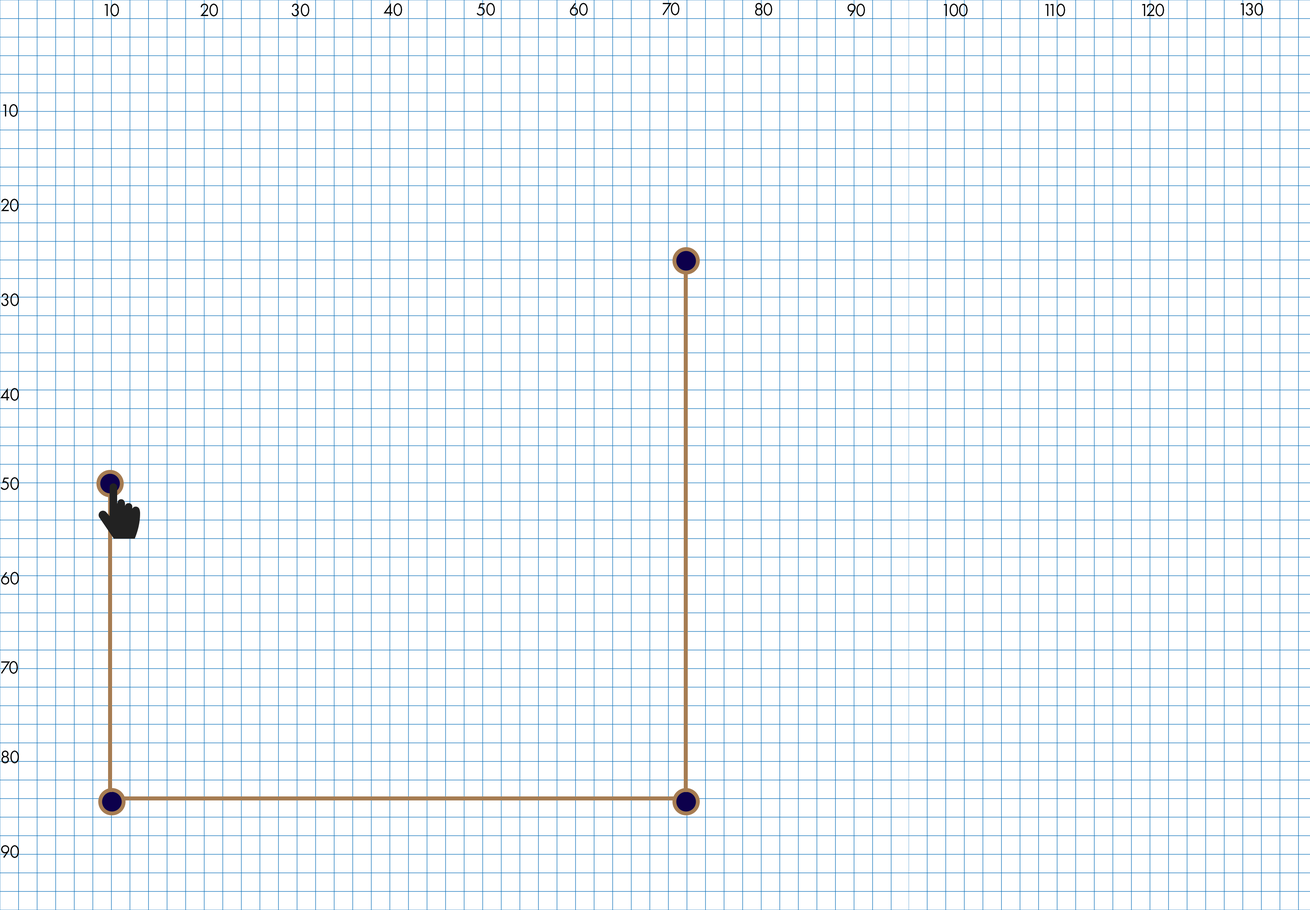
<style>
.page{position:relative;width:1310px;height:910px;background:#ffffff}
.page>*{position:absolute;margin:0}
.t1{font:18.2px "FuturaPT-Book";letter-spacing:-0.05em;color:#030303}
</style>
<div class="page">
<p class="t1" style="left:104px;top:4px;width:15px;height:12px">10</p>
<p class="t1" style="left:200px;top:4px;width:18px;height:12px">20</p>
<p class="t1" style="left:292px;top:4px;width:17px;height:12px">30</p>
<p class="t1" style="left:384px;top:3px;width:18px;height:13px">40</p>
<p class="t1" style="left:476px;top:3px;width:19px;height:13px">50</p>
<p class="t1" style="left:570px;top:3px;width:18px;height:13px">60</p>
<p class="t1" style="left:662px;top:3px;width:18px;height:12px">70</p>
<p class="t1" style="left:755px;top:3px;width:17px;height:13px">80</p>
<p class="t1" style="left:848px;top:4px;width:17px;height:12px">90</p>
<p class="t1" style="left:944px;top:4px;width:24px;height:12px">100</p>
<p class="t1" style="left:1045px;top:4px;width:20px;height:12px">110</p>
<p class="t1" style="left:1142px;top:4px;width:22px;height:12px">120</p>
<p class="t1" style="left:1241px;top:3px;width:22px;height:13px">130</p>
<p class="t1" style="left:3px;top:104px;width:15px;height:13px">10</p>
<p class="t1" style="left:1px;top:199px;width:18px;height:12px">20</p>
<p class="t1" style="left:1px;top:293px;width:18px;height:13px">30</p>
<p class="t1" style="left:0px;top:388px;width:19px;height:13px">40</p>
<p class="t1" style="left:0px;top:477px;width:19px;height:13px">50</p>
<p class="t1" style="left:1px;top:572px;width:18px;height:13px">60</p>
<p class="t1" style="left:1px;top:661px;width:17px;height:13px">70</p>
<p class="t1" style="left:1px;top:751px;width:18px;height:12px">80</p>
<p class="t1" style="left:1px;top:845px;width:18px;height:13px">90</p>
</div>
